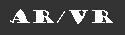
<style>
.page{position:relative;width:125px;height:35px;background:#333333}
.page>*{position:absolute;margin:0}
.t1{font:18px "GoudyStout";color:#ffffff}
</style>
<div class="page">
<p class="t1" style="left:10px;top:9px;width:103px;height:15px">AR/VR</p>
</div>
